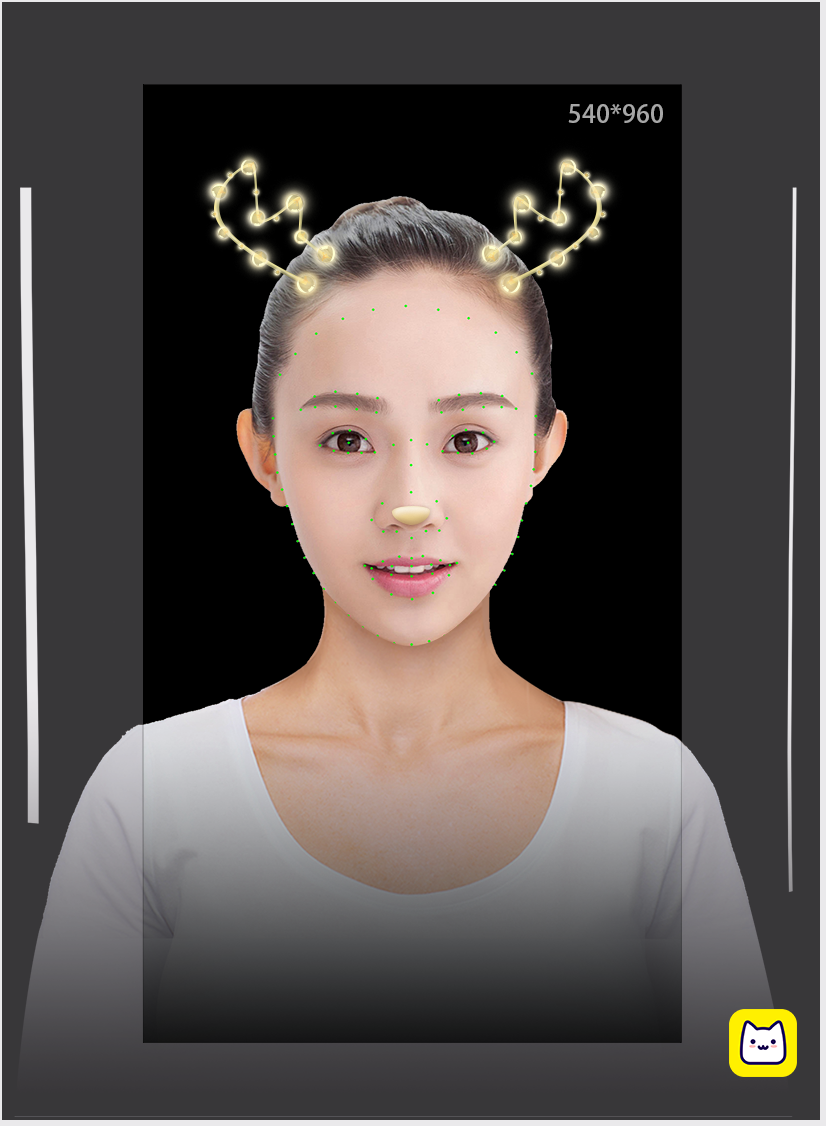
<style>
.page{position:relative;width:826px;height:1126px;background:#383739}
.page>*{position:absolute;margin:0}
.t1{font:25px "AdobeHeitiStd-Regular";color:#a7a7a7}
</style>
<div class="page">
<p class="t1" style="left:568px;top:104px;width:95px;height:19px">540*960</p>
</div>
